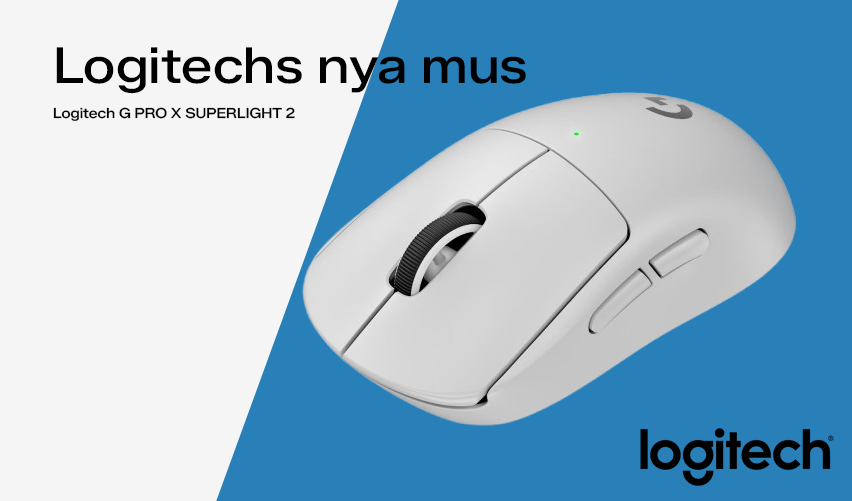
<style>
.page{position:relative;width:852px;height:501px;background:#2980b9}
.page>*{position:absolute;margin:0}
.t1{font:50px "ZalandoSansSemiExpanded-Medium";color:#000000}
.t2{font:14px "ZalandoSansSemiExpanded-Medium";color:#000000}
</style>
<div class="page">
<p class="t1" style="left:56px;top:47px;width:470px;height:47px">Logitechs nya mus</p>
<p class="t2" style="left:53px;top:107px;width:242px;height:14px">Logitech G PRO X SUPERLIGHT 2</p>
</div>
